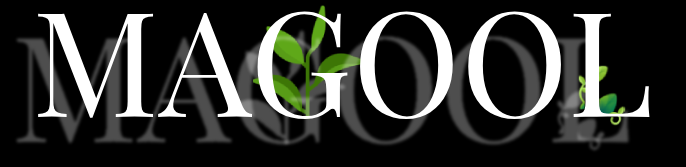
<style>
.page{position:relative;width:686px;height:167px;background:#000000}
.page>*{position:absolute;margin:0}
.t1{font:146px "PlayfairDisplay-Regular";color:#ffffff}
</style>
<div class="page">
<p class="t1" style="left:38px;top:11px;width:612px;height:109px">MAGOOL</p>
</div>
